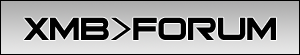
<style>
.page{position:relative;width:300px;height:55px}
.page>*{position:absolute;margin:0}
.t1{font:43px "Bitsumishi";color:#000000}
</style>
<div class="page">
<p class="t1" style="left:23px;top:17px;width:253px;height:23px">xmb&gt;Forum</p>
</div>
